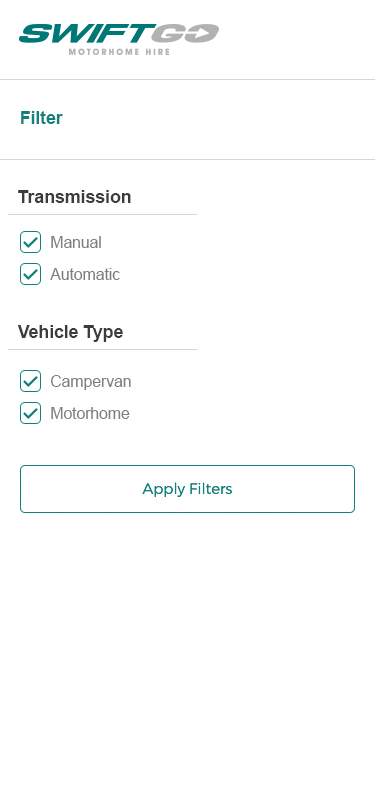
<style>
.page{position:relative;width:375px;height:800px;background:#ffffff}
.page>*{position:absolute;margin:0}
.t1{font:18px "Arial-BoldMT";letter-spacing:-0.01em;color:#117f7a}
.t2{font:18px "Arial-BoldMT";letter-spacing:-0.01em;color:#3c3b3f}
.t3{font:16px "ArialMT";letter-spacing:-0.01em;color:#7f7e7e}
</style>
<div class="page">
<p class="t1" style="left:21px;top:111px;width:42px;height:13px">Filter</p>
<p class="t2" style="left:18px;top:190px;width:113px;height:13px">Transmission</p>
<p class="t3" style="left:51px;top:236px;width:50px;height:12px">Manual</p>
<p class="t3" style="left:50px;top:268px;width:70px;height:12px">Automatic</p>
<p class="t2" style="left:17px;top:325px;width:106px;height:17px">Vehicle Type</p>
<p class="t3" style="left:51px;top:375px;width:80px;height:15px">Campervan</p>
<p class="t3" style="left:51px;top:407px;width:79px;height:12px">Motorhome</p>
</div>
